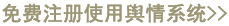
<style>
.page{position:relative;width:229px;height:26px;background:#ffffff}
.page>*{position:absolute;margin:0}
.t1{font:20px "SimHei";color:#9c9574;font-weight:bold}
</style>
<div class="page">
<p class="t1" style="left:2px;top:3px;width:225px;height:20px">免费注册使用舆情系统&gt;&gt;</p>
</div>
